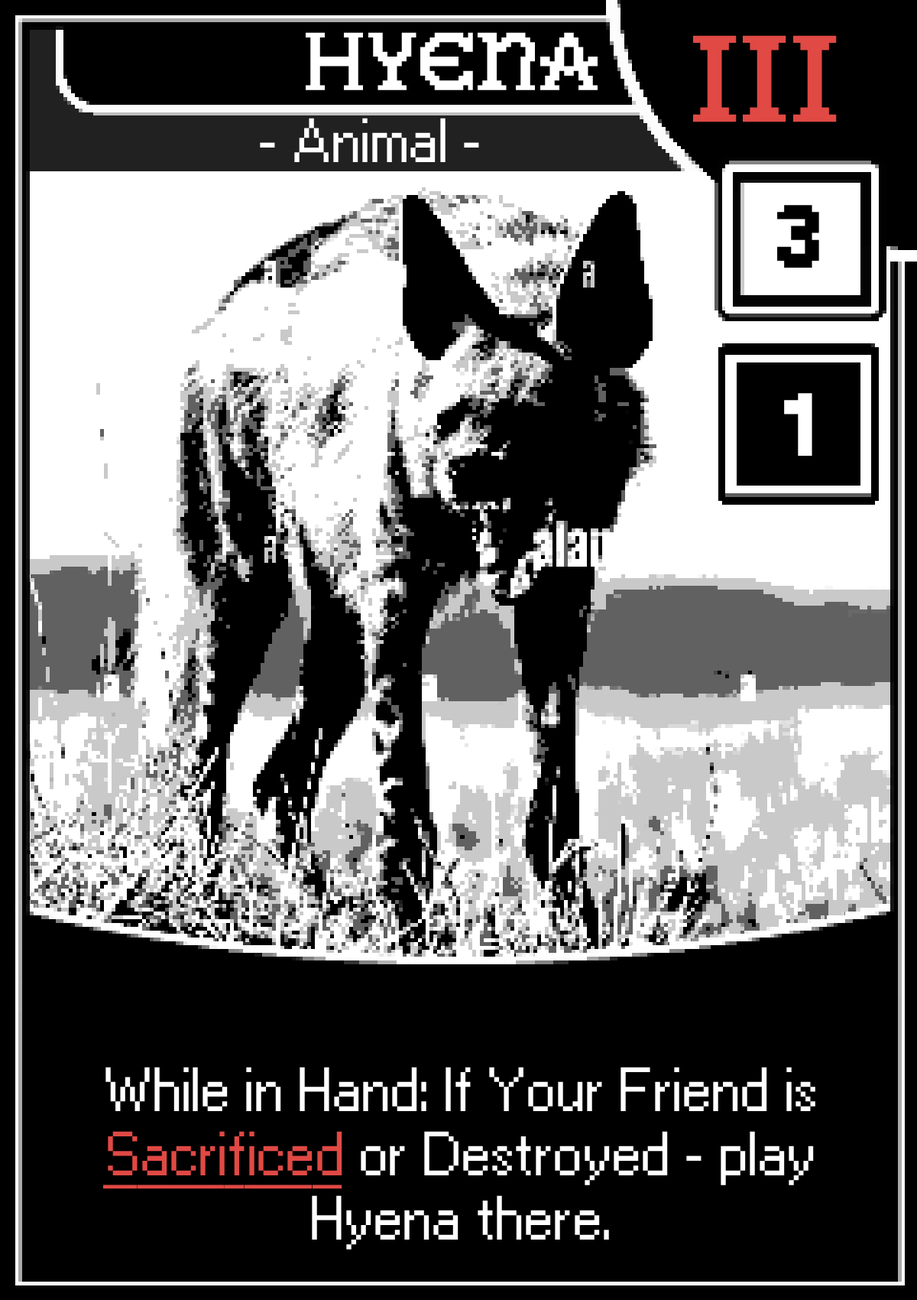
<style>
.page{position:relative;width:917px;height:1300px;background:#000000}
.page>*{position:absolute;margin:0}
.t1{font:76.5px "GallaeciaForte";color:#ffffff}
.t2{font:114.7px "GallaeciaForte";color:#e04944}
.t3{font:53.5px "Ari-W9500-Regular";color:#ffffff}
.t4{font:76.5px "AriW9500-Condensed-Display";color:#000000}
.t5{font:76.5px "AriW9500-Condensed-Display";color:#ffffff}
.t6{font:53.5px "Ari-W9500-Regular";color:#e04944;text-decoration:underline}
</style>
<div class="page">
<p class="t1" style="left:306px;top:32px;width:292px;height:58px">Hyena</p>
<p class="t2" style="left:693px;top:35px;width:144px;height:87px">III</p>
<p class="t3" style="left:260px;top:118px;width:219px;height:44px">- Animal -</p>
<p class="t4" style="left:778px;top:205px;width:42px;height:63px">3</p>
<p class="t5" style="left:784px;top:393px;width:29px;height:63px">1</p>
<p class="t3" style="left:103px;top:1067px;width:713px;height:182px;text-align:center">While in Hand: If Your Friend is <span class="t6">Sacrificed </span>or Destroyed - play Hyena there.</p>
</div>
